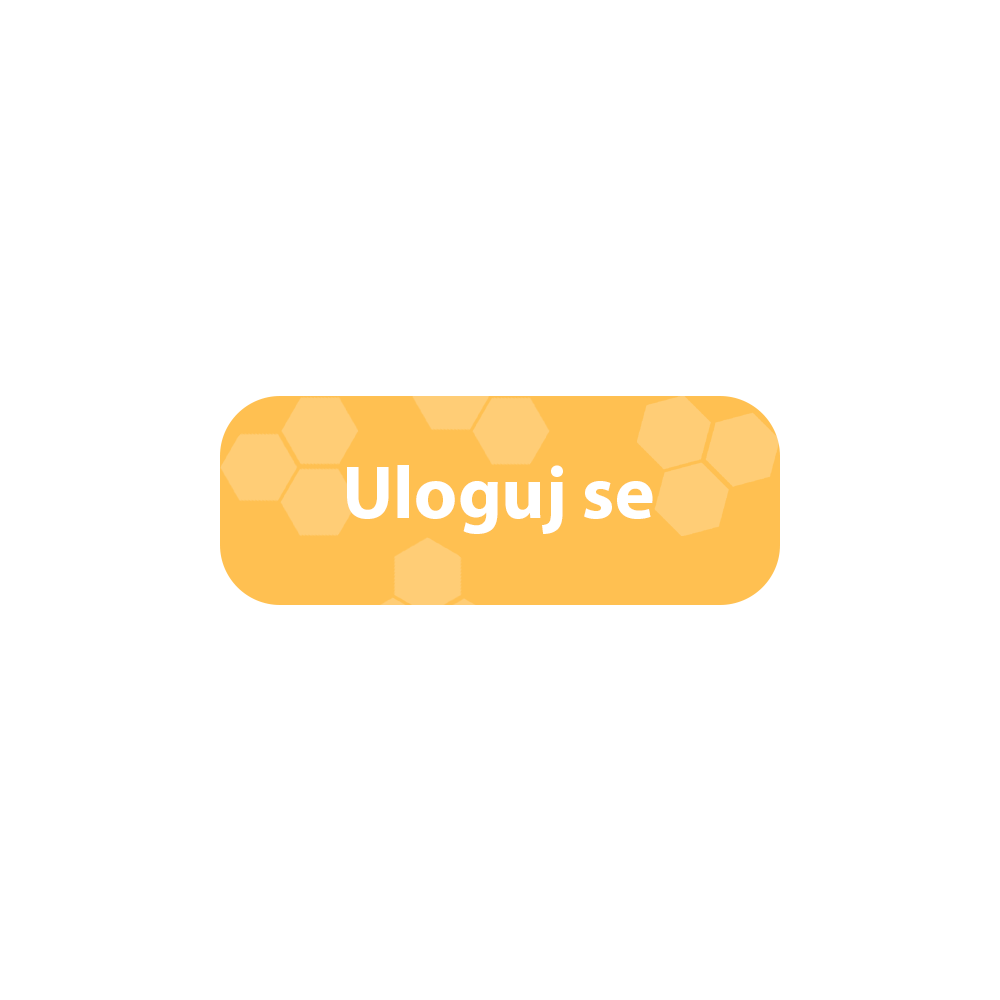
<style>
.page{position:relative;width:1000px;height:1000px;background:#ffffff}
.page>*{position:absolute;margin:0}
.t1{font:75px "MyriadPro-Bold";color:#ffffff}
</style>
<div class="page">
<p class="t1" style="left:347px;top:465px;width:306px;height:69px">Uloguj se</p>
</div>
